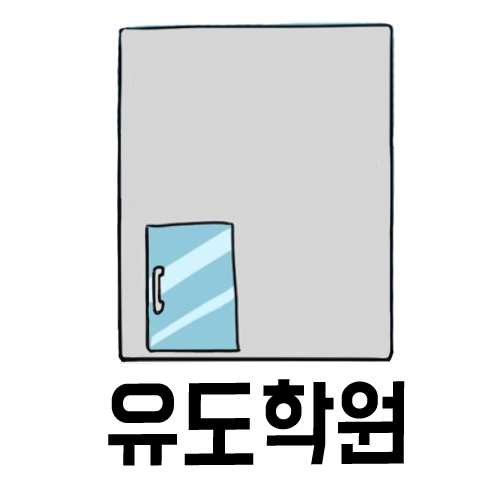
<style>
.page{position:relative;width:500px;height:500px;background:#ffffff}
.page>*{position:absolute;margin:0}
.t1{font:86.9px "BMDoHyeon";color:#000000;scale:0.92 1}
</style>
<div class="page">
<p class="t1" style="left:108px;top:379px;width:297px;height:87px">유도학원</p>
</div>
